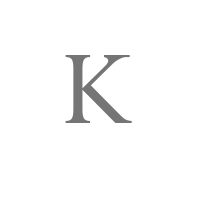
<style>
.page{position:relative;width:200px;height:200px;background:#ffffff}
.page>*{position:absolute;margin:0}
.t1{font:119px "Perpetua";color:#757575}
</style>
<div class="page">
<p class="t1" style="left:65px;top:55px;width:67px;height:68px">K</p>
</div>
